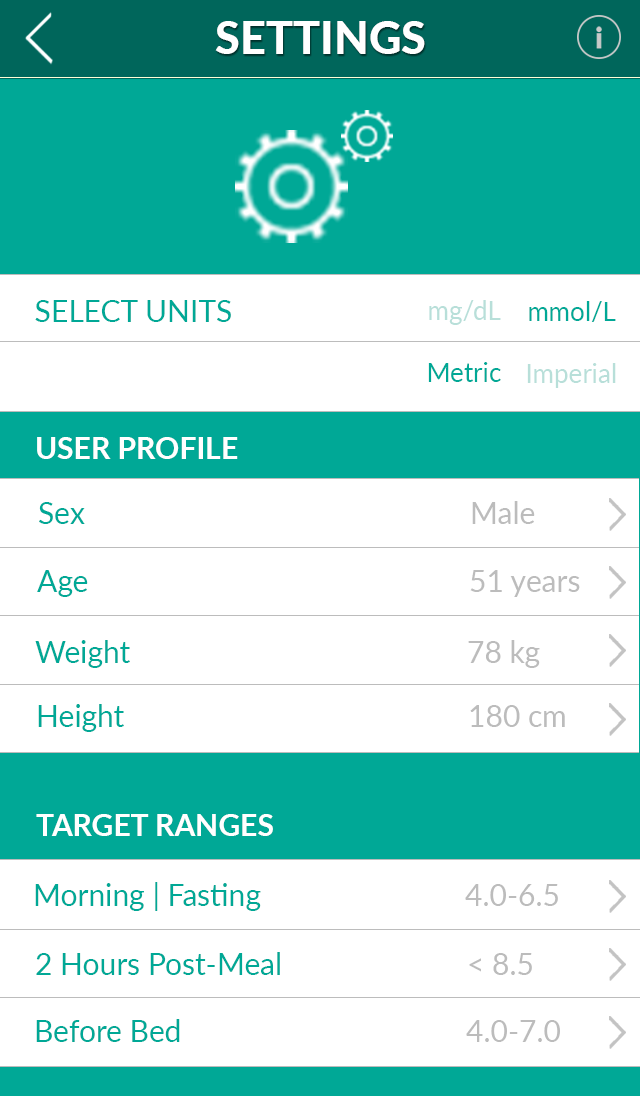
<style>
.page{position:relative;width:640px;height:1096px;background:#ffffff}
.page>*{position:absolute;margin:0}
.t1{font:45px "Lato-Heavy";color:#ffffff}
.t2{font:30px "Lato-Regular";color:#00a896}
.t3{font:26px "Lato-Regular";color:#b8dfd9}
.t4{font:26px "Lato-Regular";color:#00a896}
.t5{font:30px "Lato-Bold";color:#ffffff}
.t6{font:30px "Lato-Regular";color:#bcbcbc}
</style>
<div class="page">
<p class="t1" style="left:215px;top:21px;width:210px;height:33px">SETTINGS</p>
<p class="t2" style="left:35px;top:300px;width:196px;height:22px">SELECT UNITS</p>
<p class="t3" style="left:429px;top:300px;width:72px;height:25px">mg/dL</p>
<p class="t4" style="left:529px;top:301px;width:87px;height:21px">mmol/L</p>
<p class="t4" style="left:428px;top:362px;width:73px;height:20px">Metric</p>
<p class="t3" style="left:527px;top:363px;width:89px;height:25px">Imperial</p>
<p class="t5" style="left:37px;top:437px;width:201px;height:22px">USER PROFILE</p>
<p class="t6" style="left:39px;top:501px;width:496px;height:23px"><span class="t2">Sex           </span>Male</p>
<p class="t6" style="left:37px;top:570px;width:543px;height:27px"><span class="t2">Age           </span>51 years</p>
<p class="t2" style="left:35px;top:640px;width:505px;height:28px">Weight          <span class="t6">78 kg</span></p>
<p class="t2" style="left:38px;top:704px;width:527px;height:28px">Height          <span class="t6">180 cm</span></p>
<p class="t5" style="left:36px;top:814px;width:237px;height:22px">TARGET RANGES</p>
<p class="t2" style="left:35px;top:882px;width:523px;height:29px">Morning | Fasting      <span class="t6">4.0-6.5</span></p>
<p class="t2" style="left:36px;top:952px;width:496px;height:23px">2 Hours Post-Meal      <span class="t6">&lt; 8.5</span></p>
<p class="t2" style="left:36px;top:1019px;width:524px;height:23px">Before Bed        <span class="t6">4.0-7.0</span></p>
</div>
